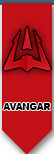
<style>
.page{position:relative;width:54px;height:154px;background:#c21018}
.page>*{position:absolute;margin:0}
.t1{font:8.8px "Arial-Black";letter-spacing:-0.01em;color:#000000}
</style>
<div class="page">
<p class="t1" style="left:3px;top:103px;width:48px;height:7px">AVANGAR</p>
</div>
